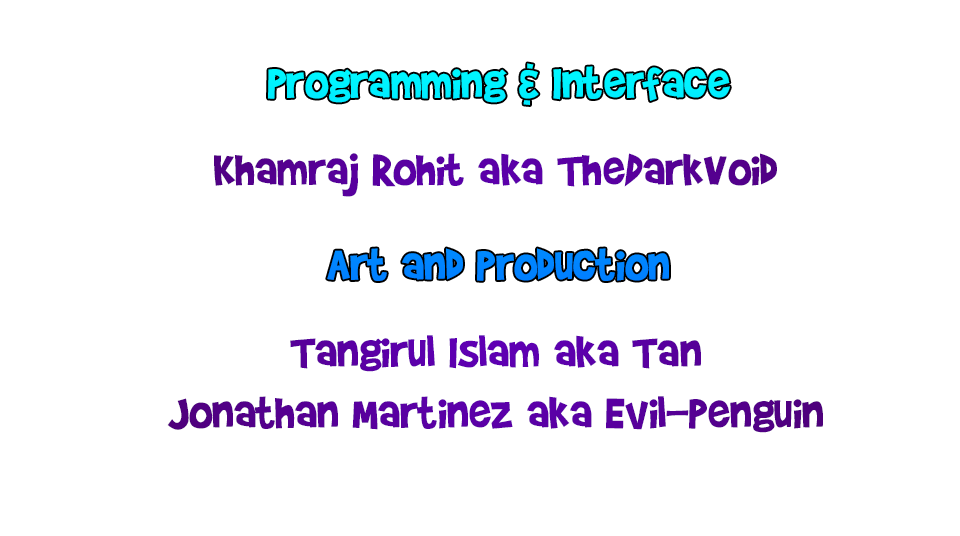
<style>
.page{position:relative;width:960px;height:536px;background:#ffffff}
.page>*{position:absolute;margin:0}
.t1{font:50.7px "BradyBunchRemastered"}
.t2{font:50.7px "BradyBunchRemastered";color:#58009e}
</style>
<div class="page">
<p class="t1" style="left:268px;top:63px;width:462px;height:218px;text-align:center">Programming &amp; Interface<br><br><br>Art and Production</p>
<p class="t2" style="left:167px;top:153px;width:656px;height:280px;text-align:center">Khamraj Rohit aka TheDarkVoid<br><br><br>Tangirul Islam aka Tan<br>Jonathan Martinez aka Evil-Penguin</p>
</div>
